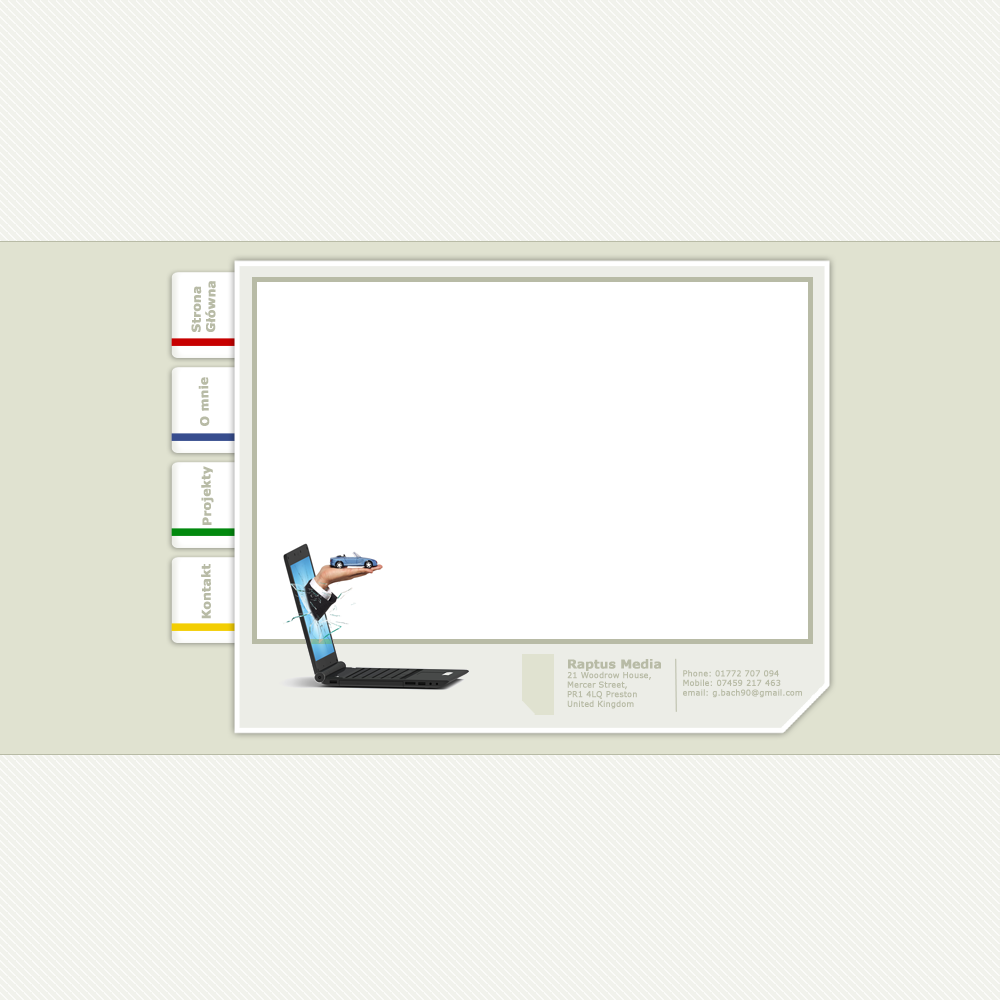
<style>
.page{position:relative;width:1000px;height:1000px;background:#f1f2ec}
.page>*{position:absolute;margin:0}
.t1{font:12px "Verdana-Bold";color:#b8bba6;font-weight:bold}
.t2{font:8px "Verdana";color:#b8bba6;font-weight:bold}
</style>
<div class="page">
<p class="t1" style="left:191px;top:281px;width:25px;height:51px;rotate:-89deg">Strona <br>Główna</p>
<p class="t1" style="left:198px;top:377px;width:12px;height:49px;rotate:-91deg">O mnie</p>
<p class="t1" style="left:201px;top:466px;width:13px;height:59px;rotate:-91deg">Projekty</p>
<p class="t1" style="left:201px;top:564px;width:10px;height:55px;rotate:-90deg">Kontakt</p>
<p class="t2" style="left:567px;top:659px;width:94px;height:50px"><span class="t1">Raptus Media<br></span>21 Woodrow House,<br>Mercer Street,<br>PR1 4LQ Preston<br>United Kingdom</p>
<p class="t2" style="left:683px;top:670px;width:119px;height:28px">Phone: 01772 707 094<br>Mobile: 07459 217 463<br>email: g.bach90@gmail.com</p>
</div>
